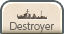
<style>
.page{position:relative;width:64px;height:34px}
.page>*{position:absolute;margin:0}
.t1{font:10px "UDShinGoPro-Light";color:#6a6560;scale:0.9 1}
</style>
<div class="page">
<p class="t1" style="left:10px;top:22px;width:44px;height:11px">Destroyer</p>
</div>
